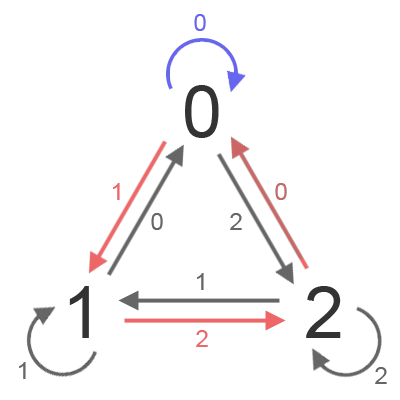
<style>
.page{position:relative;width:400px;height:400px;background:#ffffff}
.page>*{position:absolute;margin:0}
.t1{font:24px "ArialMT";color:#6666ee}
.t2{font:72px "ArialMT";color:#333333}
.t3{font:24px "ArialMT";color:#ee6666}
.t4{font:24px "ArialMT";color:#cc6666}
.t5{font:24px "ArialMT";color:#666666}
</style>
<div class="page">
<p class="t1" style="left:194px;top:14px;width:12px;height:17px">0</p>
<p class="t2" style="left:185px;top:85px;width:34px;height:53px">0</p>
<p class="t3" style="left:113px;top:183px;width:7px;height:17px">1</p>
<p class="t4" style="left:275px;top:183px;width:12px;height:17px">0</p>
<p class="t5" style="left:151px;top:213px;width:12px;height:17px">0</p>
<p class="t5" style="left:230px;top:213px;width:12px;height:17px">2</p>
<p class="t5" style="left:197px;top:273px;width:7px;height:17px">1</p>
<p class="t2" style="left:69px;top:286px;width:20px;height:52px">1</p>
<p class="t2" style="left:306px;top:286px;width:35px;height:52px">2</p>
<p class="t3" style="left:196px;top:330px;width:12px;height:17px">2</p>
<p class="t5" style="left:19px;top:362px;width:7px;height:17px">1</p>
<p class="t5" style="left:375px;top:367px;width:12px;height:17px">2</p>
</div>
